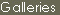
<style>
.page{position:relative;width:60px;height:15px;background:#676753}
.page>*{position:absolute;margin:0}
.t1{font:13.3px "LevenimMT";color:#fefefe}
</style>
<div class="page">
<p class="t1" style="left:1px;top:2px;width:54px;height:10px">Galleries</p>
</div>
